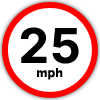
<style>
.page{position:relative;width:100px;height:100px;background:#ffffff}
.page>*{position:absolute;margin:0}
.t1{font:48px "Inter-Bold";letter-spacing:0.02em;color:#000000}
.t2{font:12px "Inter-Bold";letter-spacing:0.02em;color:#000000}
</style>
<div class="page">
<p class="t1" style="left:21px;top:27px;width:58px;height:37px">25</p>
<p class="t2" style="left:37px;top:68px;width:26px;height:12px">mph</p>
</div>
